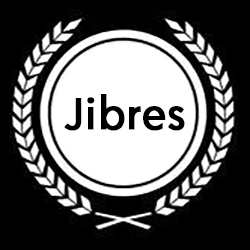
<style>
.page{position:relative;width:250px;height:250px;background:#000000}
.page>*{position:absolute;margin:0}
.t1{font:44px "Acre-Medium";color:#000000;font-weight:bold}
</style>
<div class="page">
<p class="t1" style="left:64px;top:94px;width:121px;height:37px">Jibres</p>
</div>
